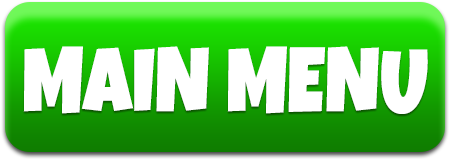
<style>
.page{position:relative;width:451px;height:161px;background:#ffffff}
.page>*{position:absolute;margin:0}
.t1{font:92px "LuckiestGuy-Regular";color:#ffffff;text-transform:uppercase;scale:0.85 1}
</style>
<div class="page">
<p class="t1" style="left:23px;top:46px;width:405px;height:68px">Main Menu</p>
</div>
